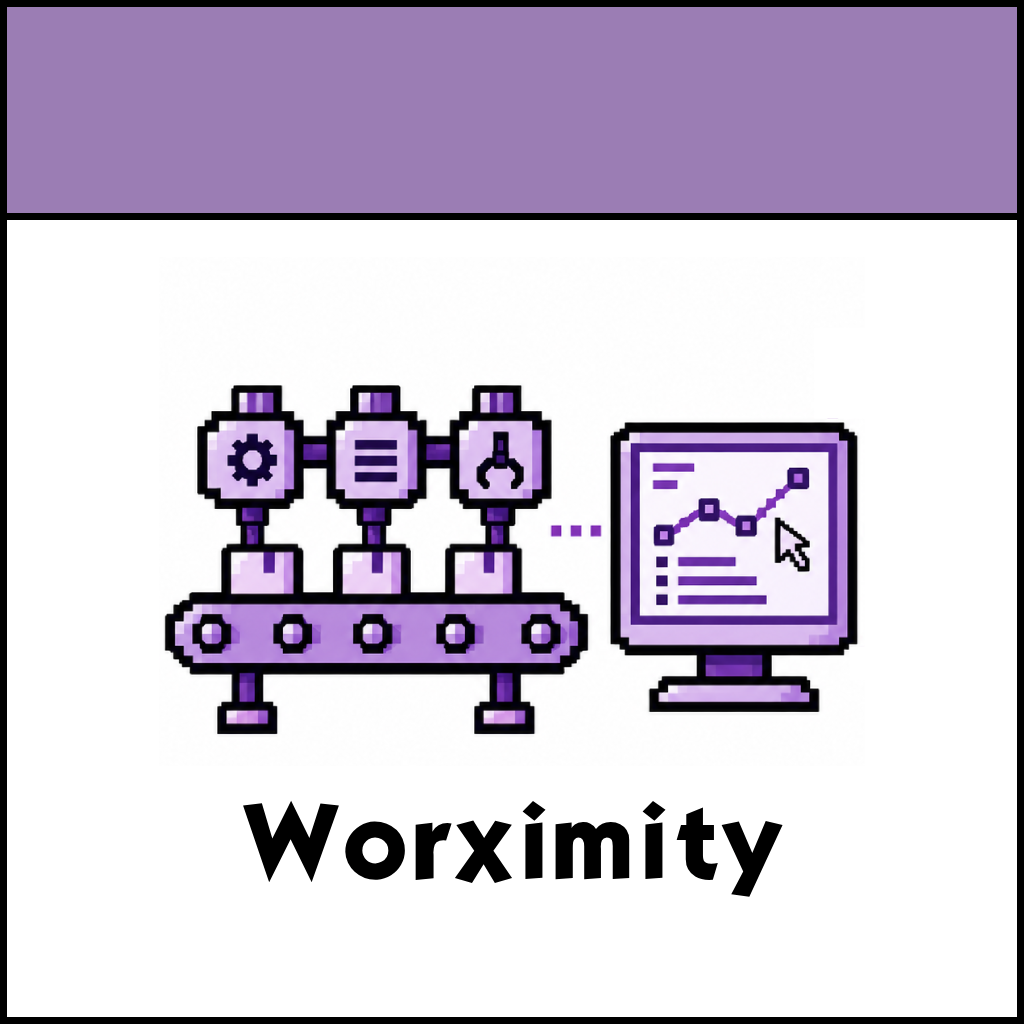
<style>
.page{position:relative;width:1024px;height:1024px;background:#ffffff}
.page>*{position:absolute;margin:0}
.t1{font:90px "KabelBdNormal";color:#000000}
</style>
<div class="page">
<p class="t1" style="left:243px;top:800px;width:540px;height:97px">Worximity</p>
</div>
